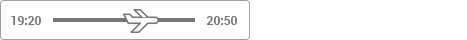
<style>
.page{position:relative;width:467px;height:40px;background:#ffffff}
.page>*{position:absolute;margin:0}
.t1{font:12px "Roboto-Bold";color:#767676;text-transform:uppercase}
</style>
<div class="page">
<p class="t1" style="left:11px;top:16px;width:30px;height:9px">19:20</p>
<p class="t1" style="left:207px;top:16px;width:30px;height:9px">20:50</p>
</div>
